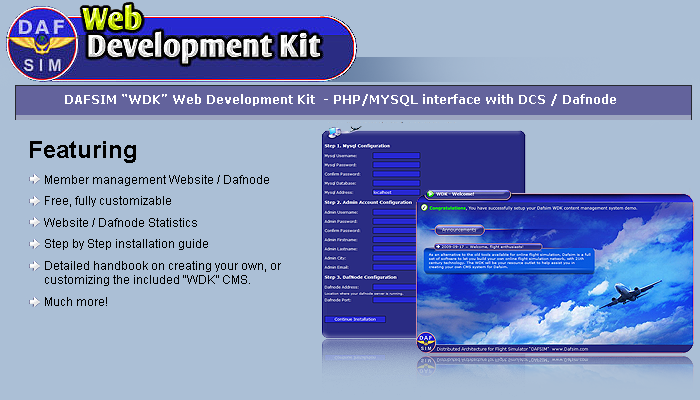
<style>
.page{position:relative;width:700px;height:400px;background:#abbfd6}
.page>*{position:absolute;margin:0}
.t1{font:12px "Verdana-Bold";color:#ffffff}
.t2{font:24px "Arial-BoldMT";color:#000000}
.t3{font:12px "ArialMT";color:#000000}
</style>
<div class="page">
<p class="t1" style="left:65px;top:94px;width:551px;height:12px">DAFSIM “WDK” Web Development Kit  - PHP/MYSQL interface with DCS / Dafnode</p>
<p class="t2" style="left:30px;top:141px;width:106px;height:22px">Featuring</p>
<p class="t3" style="left:44px;top:175px;width:237px;height:131px">Member management Website / Dafnode<br> <br>Free, fully customizable<br> <br>Website / Dafnode Statistics<br> <br>Step by Step installation guide<br> <br>Detailed handbook on creating your own, or <br>customizing the included “WDK” CMS.<br> <br>Much more!</p>
</div>
